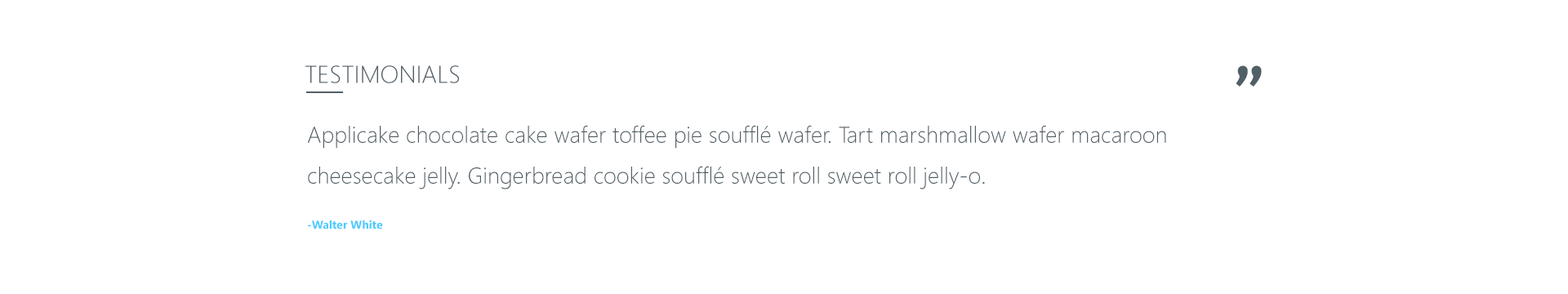
<style>
.page{position:relative;width:1568px;height:294px;background:#ffffff}
.page>*{position:absolute;margin:0}
.t1{font:24.5px "SegoeUI-Light";color:#515f67;text-transform:uppercase}
.t2{font:58.8px "Bitter-Bold";color:#515f67}
.t3{font:22.9px/40.8px "SegoeUI-Light";color:#515f67}
.t4{font:11.4px "SegoeUI-Bold";color:#4bcaff}
</style>
<div class="page">
<p class="t1" style="left:305px;top:65px;width:154px;height:18px">Testimonials</p>
<p class="t2" style="left:1236px;top:65px;width:26px;height:22px">”</p>
<p class="t3" style="left:307px;top:125px;width:859px;height:64px">Applicake chocolate cake wafer toffee pie soufflé wafer. Tart marshmallow wafer macaroon cheesecake jelly. Gingerbread cookie soufflé sweet roll sweet roll jelly-o.</p>
<p class="t4" style="left:308px;top:220px;width:75px;height:9px">-Walter White</p>
</div>
